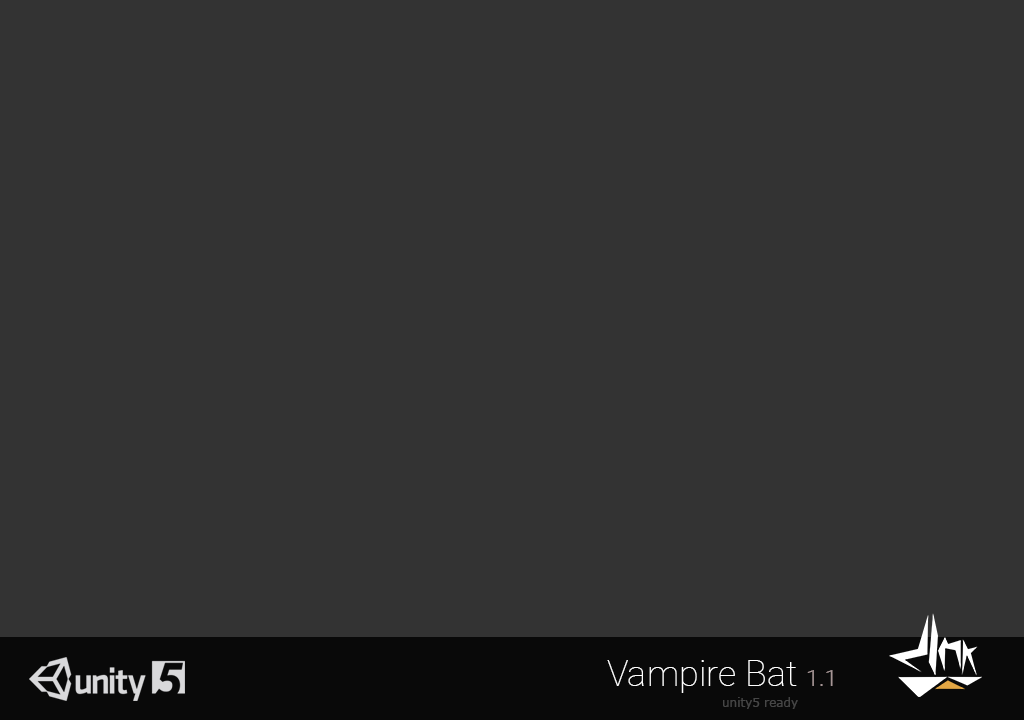
<style>
.page{position:relative;width:1024px;height:720px;background:#333333}
.page>*{position:absolute;margin:0}
.t1{font:36.2px "Roboto-Thin";color:#ffffff}
.t2{font:23.2px "Roboto-Light";color:#a79696}
.t3{font:12px "Verdana";color:#464646}
</style>
<div class="page">
<p class="t1" style="left:607px;top:660px;width:226px;height:33px">Vampire Bat <span class="t2">1.1</span></p>
<p class="t3" style="left:723px;top:697px;width:75px;height:12px">unity5 ready</p>
</div>
